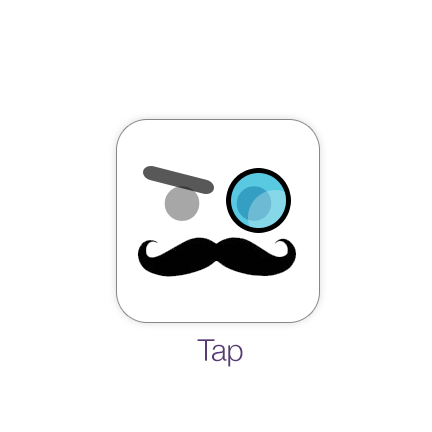
<style>
.page{position:relative;width:432px;height:432px;background:#ffffff}
.page>*{position:absolute;margin:0}
.t1{font:240px "LiGothicMed";color:#a7a7a7}
.t2{font:240px "LiGothicMed"}
.t3{font:30px "HelveticaNeue-Light";color:#563975}
</style>
<div class="page">
<p class="t1" style="left:164px;top:186px;width:36px;height:35px">.</p>
<p class="t2" style="left:236px;top:186px;width:36px;height:35px">.</p>
<p class="t3" style="left:197px;top:339px;width:46px;height:28px">Tap</p>
</div>
